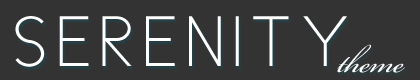
<style>
.page{position:relative;width:420px;height:80px;background:#333333}
.page>*{position:absolute;margin:0}
.t1{font:72px "CicleFina";letter-spacing:0.13em;color:#ffffff;text-transform:uppercase}
.t2{font:48px "BeautifulES";letter-spacing:-0.01em;color:#ffffff}
</style>
<div class="page">
<p class="t1" style="left:15px;top:16px;width:332px;height:51px">Serenity</p>
<p class="t2" style="left:337px;top:44px;width:68px;height:29px">theme</p>
</div>
